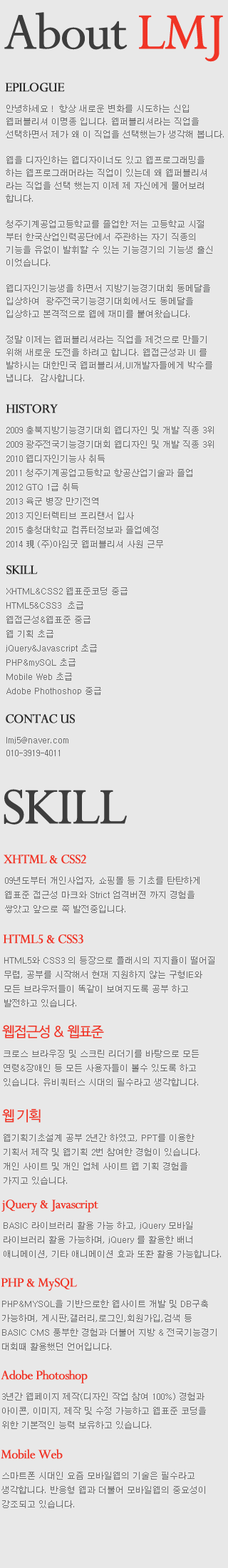
<style>
.page{position:relative;width:228px;height:1568px;background:#e8e8e8}
.page>*{position:absolute;margin:0}
.t1{font:57px "Perpetua";letter-spacing:-0.05em;color:#3d3d3d;font-weight:bold}
.t2{font:57px "Perpetua";letter-spacing:-0.05em;color:#f03426;font-weight:bold}
.t3{font:14.3px "Perpetua";letter-spacing:-0.05em;color:#292929;font-weight:bold}
.t4{font:8.6px/12.8px "Dotum";color:#6e6e6e}
.t5{font:8.6px/14.3px "Dotum";color:#6e6e6e}
.t6{font:14.3px "Perpetua";letter-spacing:-0.05em;color:#f03426;font-weight:bold}
.t7{font:14.3px "NanumBarunGothic";letter-spacing:-0.05em;color:#f03426}
</style>
<div class="page">
<p class="t1" style="left:4px;top:12px;width:219px;height:50px">About<span class="t2"> LMJ</span></p>
<p class="t3" style="left:5px;top:83px;width:60px;height:9px">EPILOGUE</p>
<p class="t4" style="left:6px;top:105px;width:218px;height:277px">안녕하세요 !  항상 새로운 변화를 시도하는 신입 <br>웹퍼블리셔 이명종 입니다. 웹퍼블리셔라는 직업을 <br>선택하면서 제가 왜 이 직업을 선택했는가 생각해 봅니다. <br><br>웹을 디자인하는 웹디자이너도 있고 웹프로그래밍을 <br>하는 웹프로그래머라는 직업이 있는데 왜 웹퍼블리셔<br>라는 직업을 선택 했는지 이제 제 자신에게 물어보려 <br>합니다.<br><br>청주기계공업고등학교를 졸업한 저는 고등학교 시절 <br>부터 한국산업인력공단에서 주관하는 자기 직종의 <br>기능을 유없이 발휘할 수 있는 기능경기의 기능생 출신 <br>이었습니다. <br><br>웹디자인기능생을 하면서 지방기능경기대회 동메달을 <br>입상하여  광주전국기능경기대회에서도 동메달을 <br>입상하고 본격적으로 웹에 재미를 붙여왔습니다. <br><br>정말 이제는 웹퍼블리셔라는 직업을 제것으로 만들기<br>위해 새로운 도전을 하려고 합니다. 웹접근성과 UI 를 <br>발하시는 대한민국 웹퍼블리셔,UI개발자들에게 박수를 <br>냅니다.  감사합니다.</p>
<p class="t3" style="left:6px;top:404px;width:52px;height:9px">HISTORY</p>
<p class="t5" style="left:6px;top:426px;width:208px;height:122px">2009 충북지방기능경기대회 웹디자인 및 개발 직종 3위<br>2009 광주전국기능경기대회 웹디자인 및 개발 직종 3위<br>2010 웹디자인기능사 취득<br>2011 청주기계공업고등학교 항공산업기술과 졸업<br>2012 GTQ 1급 취득<br>2013 육군 병장 만기전역<br>2013 지인터렉티브 프리랜서 입사<br>2015 충청대학교 컴퓨터정보과 졸업예정<br>2014 現 (주)아임굿 웹퍼블리셔 사원 근무</p>
<p class="t3" style="left:6px;top:565px;width:32px;height:9px">SKILL</p>
<p class="t5" style="left:6px;top:587px;width:122px;height:108px">XHTML&amp;CSS2 웹표준코딩 중급<br>HTML5&amp;CSS3  초급<br>웹접근성&amp;웹표준 중급<br>웹 기획 초급<br>jQuery&amp;Javascript 초급<br>PHP&amp;mySQL 초급<br>Mobile Web 초급<br>Adobe Phothoshop 중급</p>
<p class="t3" style="left:6px;top:714px;width:69px;height:9px">CONTAC US</p>
<p class="t4" style="left:6px;top:737px;width:62px;height:19px">lmj5@naver.com<br>010-3919-4011</p>
<p class="t1" style="left:4px;top:789px;width:123px;height:36px">SKILL</p>
<p class="t6" style="left:4px;top:855px;width:82px;height:9px">XHTML &amp; CSS2</p>
<p class="t5" style="left:5px;top:877px;width:195px;height:36px">09년도부터 개인사업자, 쇼핑몰 등 기초를 탄탄하게 <br>웹표준 접근성 마크와 Strict 엄격버젼 까지 경험을 <br>쌓았고 앞으로 쭉 발전중입니다.</p>
<p class="t6" style="left:3px;top:934px;width:80px;height:10px">HTML5 &amp; CSS3</p>
<p class="t5" style="left:4px;top:956px;width:211px;height:51px">HTML5와 CSS3 의 등장으로 플래시의 지지율이 떨어질 <br>무렵, 공부를 시작해서 현재 지원하지 않는 구형IE와 <br>모든 브라우저들이 똑같이 보여지도록 공부 하고 <br>발전하고 있습니다.</p>
<p class="t7" style="left:2px;top:1025px;width:102px;height:13px">웹접근성 &amp; 웹표준</p>
<p class="t5" style="left:4px;top:1050px;width:195px;height:36px">크로스 브라우징 및 스크린 리더기를 바탕으로 모든<br>연령&amp;장애인 등 모든 사용자들이 볼수 있도록 하고 <br>있습니다. 유비쿼터스 시대의 필수라고 생각합니다.</p>
<p class="t7" style="left:2px;top:1109px;width:39px;height:14px">웹 기획</p>
<p class="t5" style="left:4px;top:1134px;width:196px;height:51px">웹기획기초설계 공부 2년간 하였고, PPT를 이용한 <br>기획서 제작 및 웹기획 2번 참여한 경험이 있습니다. <br>개인 사이트 및 개인 업체 사이트 웹 기획 경험을 <br>가지고 있습니다.</p>
<p class="t6" style="left:1px;top:1200px;width:97px;height:12px">jQuery &amp; Javascript</p>
<p class="t5" style="left:4px;top:1222px;width:217px;height:36px">BASIC 라이브러리 활용 가능 하고, jQuery 모바일 <br>라이브러리 활용 가능하며, jQuery 를 활용한 배너 <br>애니메이션, 기타 애니메이션 효과 또환 활용 가능합니다.</p>
<p class="t6" style="left:1px;top:1278px;width:76px;height:13px">PHP &amp; MySQL</p>
<p class="t5" style="left:2px;top:1300px;width:215px;height:51px">PHP&amp;MYSQL을 기반으로한 웹사이트 개발 및 DB구축 <br>가능하며, 게시판,갤러리,로그인,회원가입,검색 등 <br>BASIC CMS 풍부한 경험과 더불어 지방 &amp; 전국기능경기<br>대회때 활용했던 언어입니다.</p>
<p class="t6" style="left:1px;top:1370px;width:87px;height:13px">Adobe Photoshop</p>
<p class="t5" style="left:2px;top:1393px;width:204px;height:36px">3년간 웹페이지 제작(디자인 작업 참여 100%) 경험과 <br>아이콘, 이미지, 제작 및 수정 가능하고 웹표준 코딩을 <br>위한 기본적인 능력 보유하고 있습니다.</p>
<p class="t6" style="left:1px;top:1449px;width:62px;height:10px">Mobile Web</p>
<p class="t5" style="left:1px;top:1472px;width:204px;height:36px">스마트폰 시대인 요즘 모바일웹의 기술은 필수라고 <br>생각합니다. 반응형 웹과 더불어 모바일웹의 중요성이 <br>강조되고 있습니다.</p>
</div>
